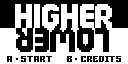
<style>
.page{position:relative;width:128px;height:64px;background:#ffffff}
.page>*{position:absolute;margin:0}
.t1{font:32.3px "Big-Apple-3PM";color:#ffffff}
.t2{font:32.3px "Big-Apple-3PM";color:#000000}
.t3{font:15.4px "Gamer";letter-spacing:0.02em;color:#000000}
.t4{font:15.4px "Gamer";color:#000000}
</style>
<div class="page">
<p class="t1" style="left:15px;top:4px;width:97px;height:24px">HIGHER</p>
<p class="t2" style="left:16px;top:28px;width:93px;height:24px;rotate:180deg">LOWER</p>
<p class="t3" style="left:7px;top:56px;width:45px;height:6px"><span class="t4">A . </span>START</p>
<p class="t4" style="left:67px;top:56px;width:54px;height:6px">B . <span class="t3">CRE</span>DITS</p>
</div>
